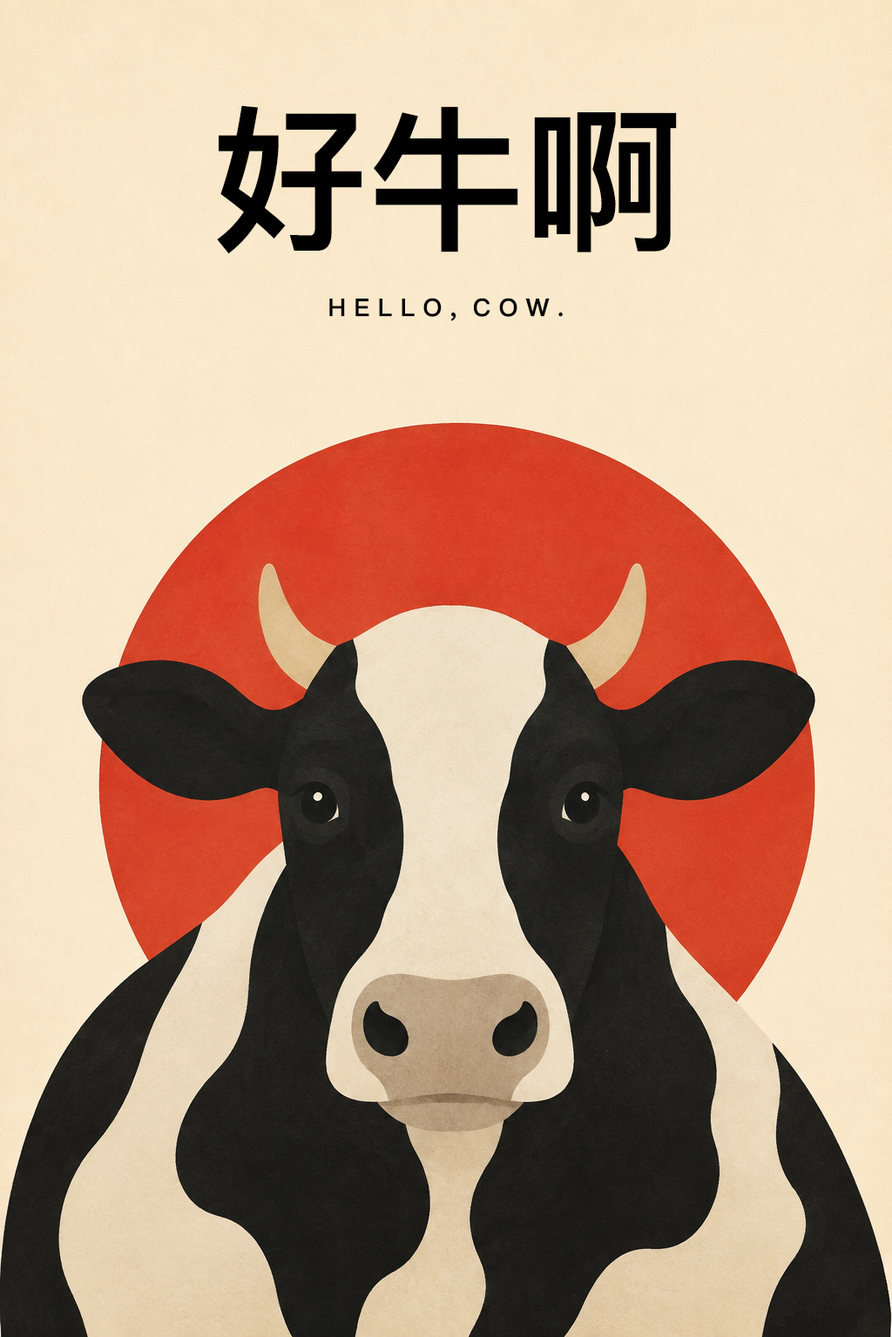
<style>
.page{position:relative;width:892px;height:1337px}
.page>*{position:absolute;margin:0}
.t1{font:156.7px "PingFangSC-Semibold";color:#000000}
.t2{font:24.4px "PingFangSC-Semibold";color:#000000}
</style>
<div class="page">
<p class="t1" style="left:217px;top:105px;width:460px;height:149px">好牛啊</p>
<p class="t2" style="left:329px;top:298px;width:233px;height:23px">H E L L O ,  C O W .</p>
</div>
